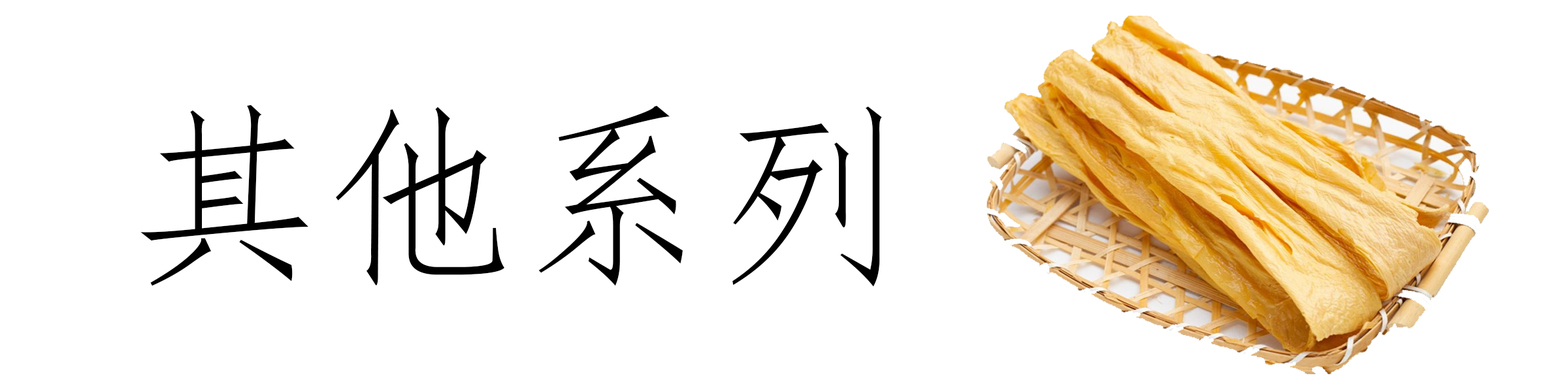
<style>
.page{position:relative;width:1568px;height:392px;background:#ffffff}
.page>*{position:absolute;margin:0}
.t1{font:196px "FangSong";color:#000000}
</style>
<div class="page">
<p class="t1" style="left:140px;top:105px;width:742px;height:182px">其他系列</p>
</div>
